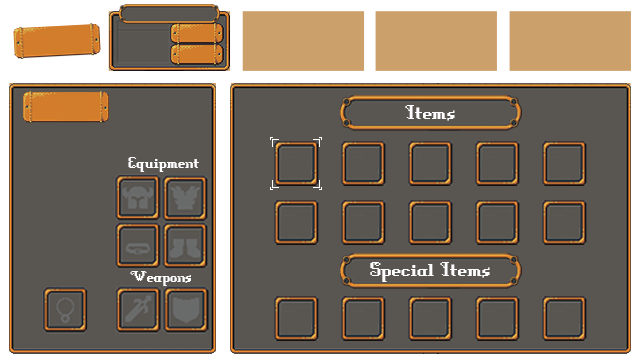
<style>
.page{position:relative;width:640px;height:360px;background:#595652}
.page>*{position:absolute;margin:0}
.t1{font:24px "DungeonFont";color:#ffffff}
.t2{font:18px "DungeonFont";color:#ffffff}
</style>
<div class="page">
<p class="t1" style="left:405px;top:105px;width:50px;height:16px">Items</p>
<p class="t2" style="left:128px;top:157px;width:71px;height:15px">Equipment</p>
<p class="t1" style="left:370px;top:262px;width:120px;height:20px">Special Items</p>
<p class="t2" style="left:130px;top:271px;width:61px;height:15px">Weapons</p>
</div>
